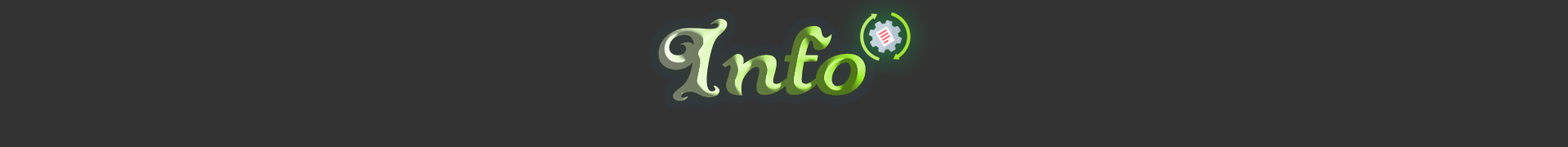
<style>
.page{position:relative;width:1568px;height:147px;background:#333333}
.page>*{position:absolute;margin:0}
.t1{font:108.8px "BlackRose";scale:1.2 1}
</style>
<div class="page">
<p class="t1" style="left:658px;top:18px;width:209px;height:83px">Info</p>
</div>
